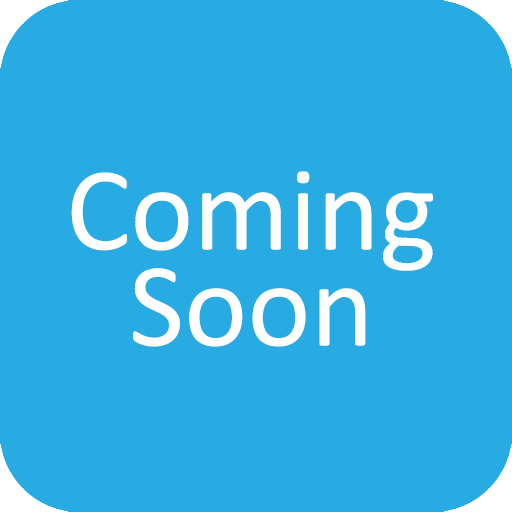
<style>
.page{position:relative;width:512px;height:512px;background:#28abe3}
.page>*{position:absolute;margin:0}
.t1{font:120px/96px "Calibri";color:#ffffff}
</style>
<div class="page">
<p class="t1" style="left:71px;top:171px;width:362px;height:176px;text-align:center">Coming<br>Soon</p>
</div>
